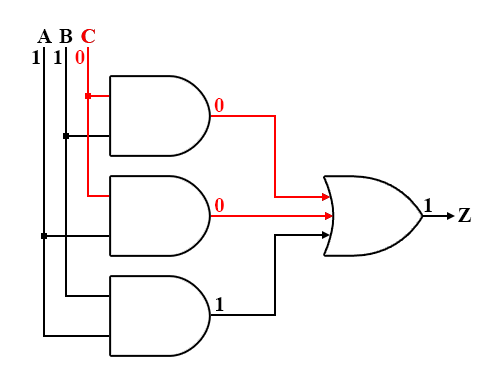
<style>
.page{position:relative;width:492px;height:384px;background:#ffffff}
.page>*{position:absolute;margin:0}
.t1{font:21px "TimesNewRomanPS-BoldMT";color:#000000}
.t2{font:21px "TimesNewRomanPS-BoldMT";color:#f70000}
.t3{font:21px "TimesNewRomanPS-BoldMT";color:#ff0000}
</style>
<div class="page">
<p class="t1" style="left:37px;top:29px;width:15px;height:14px">A</p>
<p class="t1" style="left:59px;top:29px;width:14px;height:14px">B</p>
<p class="t2" style="left:81px;top:29px;width:14px;height:14px">C</p>
<p class="t2" style="left:81px;top:29px;width:14px;height:14px">C</p>
<p class="t1" style="left:32px;top:50px;width:8px;height:14px">1</p>
<p class="t1" style="left:54px;top:50px;width:8px;height:14px">1</p>
<p class="t3" style="left:75px;top:50px;width:10px;height:14px">0</p>
<p class="t3" style="left:214px;top:98px;width:10px;height:14px">0</p>
<p class="t3" style="left:215px;top:198px;width:9px;height:14px">0</p>
<p class="t1" style="left:424px;top:198px;width:8px;height:14px">1</p>
<p class="t1" style="left:458px;top:208px;width:14px;height:14px">Z</p>
<p class="t1" style="left:216px;top:297px;width:8px;height:14px">1</p>
</div>
